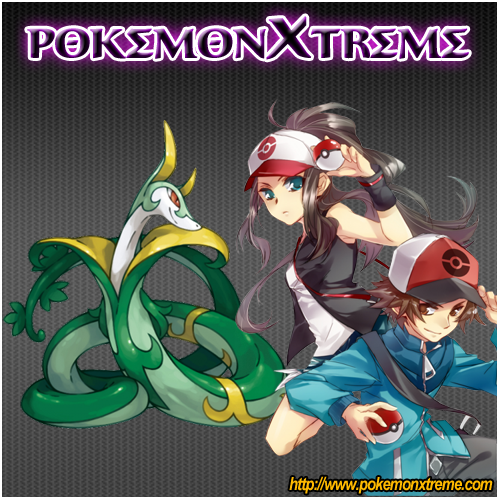
<style>
.page{position:relative;width:500px;height:500px}
.page>*{position:absolute;margin:0}
.t1{font:36px "Aegis";letter-spacing:-0.05em}
.t2{font:48px "Aegis";letter-spacing:-0.05em}
.t3{font:18px "ArialNarrow-BoldItalic";letter-spacing:-0.05em;color:#ffba00}
</style>
<div class="page">
<p class="t1" style="left:27px;top:16px;width:442px;height:44px">POkEmOn<span class="t2">X</span>trEmE</p>
<p class="t3" style="left:289px;top:476px;width:204px;height:18px">http://www.pokemonxtreme.com</p>
</div>
